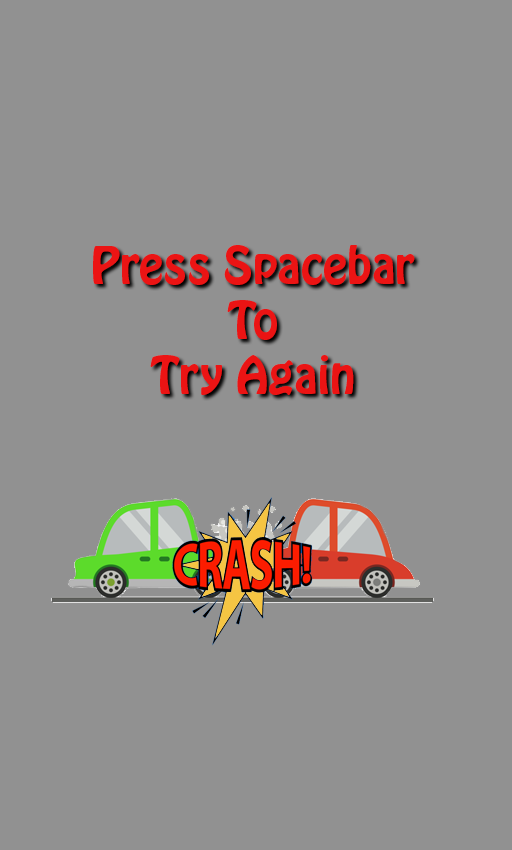
<style>
.page{position:relative;width:512px;height:850px;background:#919191}
.page>*{position:absolute;margin:0}
.t1{font:45.7px "HoboStd";color:#eb1414}
</style>
<div class="page">
<p class="t1" style="left:93px;top:245px;width:322px;height:150px;text-align:center">Press Spacebar<br>To<br>Try Again</p>
</div>
